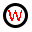
<style>
.page{position:relative;width:32px;height:32px;background:#ffffff}
.page>*{position:absolute;margin:0}
.t1{font:14px "MicrosoftYaHei";color:#ff0000}
</style>
<div class="page">
<p class="t1" style="left:8px;top:10px;width:14px;height:11px">W</p>
</div>
